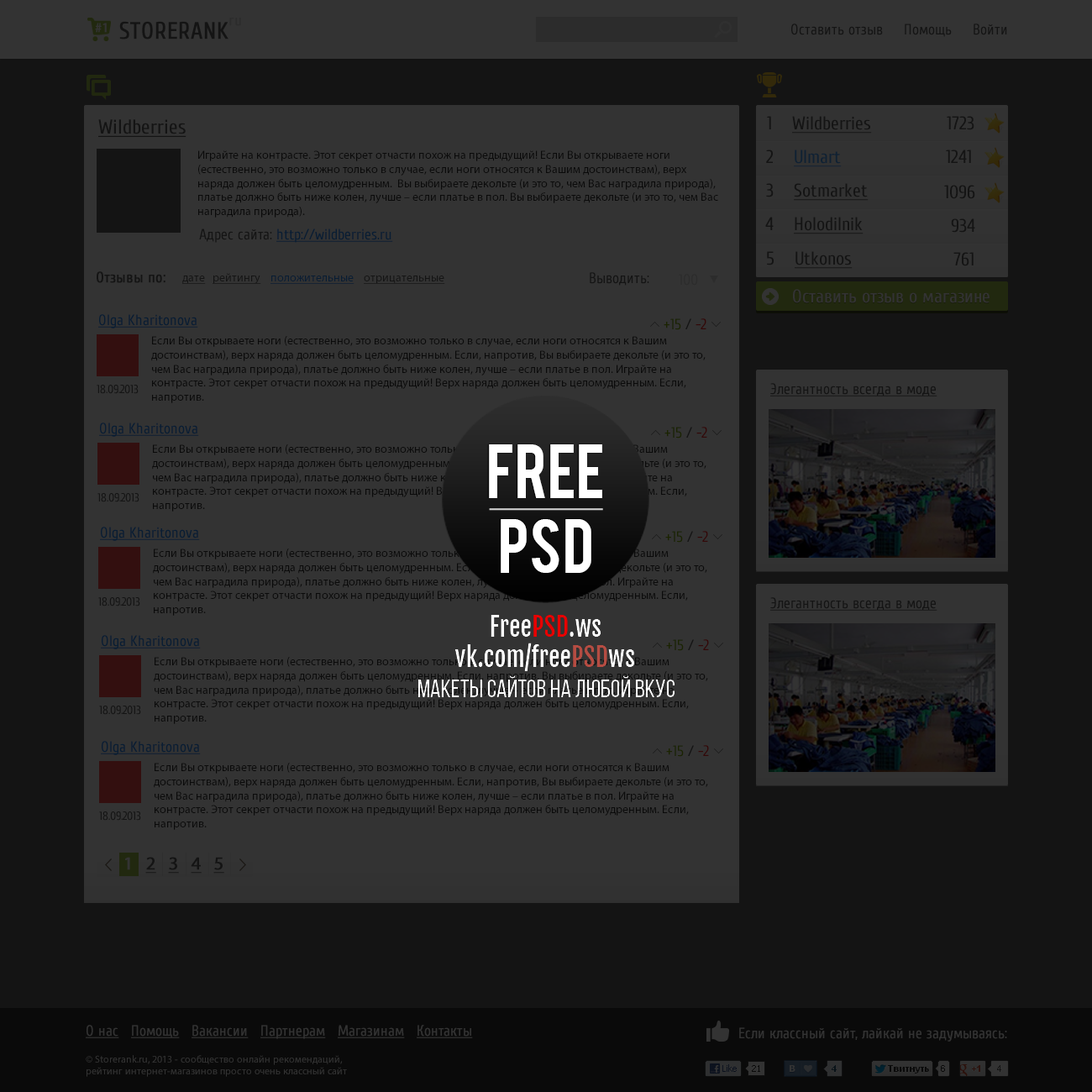
<style>
.page{position:relative;width:1092px;height:1092px;background:#333333}
.page>*{position:absolute;margin:0}
.t1{font:23.5px "Cuprum-Regular";color:#141414;font-weight:bold}
.t2{font:15.1px "Cuprum-Regular";color:#141414;font-weight:bold}
.t3{font:13.4px "MyriadPro-Regular";color:#333333;font-weight:bold}
.t4{font:15.1px "Cuprum-Regular";color:#141414}
.t5{font:20.2px "Cuprum-Regular";color:#141414;text-decoration:underline}
.t6{font:18.5px "Cuprum-Regular";color:#141414;text-decoration:underline}
.t7{font:18.5px "Cuprum-Regular";color:#141414}
.t8{font:18.5px "Cuprum-Regular";color:#0f2133;text-decoration:underline}
.t9{font:18.5px "Cuprum-Regular";color:#0f2133}
.t10{font:11.8px/14.1px "MyriadPro-Regular";color:#0a0a0a}
.t11{font:15.1px "Cuprum-Regular";text-decoration:underline}
.t12{font:15.1px "Cuprum-Regular"}
.t13{font:11.8px "MyriadPro-Regular";text-decoration:underline}
.t14{font:15.1px "Cuprum-Regular";color:#2c2c2c}
.t15{font:18.5px "Cuprum-Regular";color:#333333}
.t16{font:15.1px "Cuprum-Regular";color:#081d33;text-decoration:underline}
.t17{font:11.8px "Cuprum-Regular";color:#141414}
.t18{font:15.1px "Cuprum-Regular";color:#141414;text-decoration:underline}
.t19{font:18.5px "MyriadPro-Regular";color:#141414;font-weight:bold;text-decoration:underline}
.t20{font:18.5px "MyriadPro-Regular";color:#141414;font-weight:bold}
.t21{font:15.1px "Cuprum-Regular";color:#333333;text-decoration:underline}
.t22{font:15.1px "Cuprum-Regular";color:#333333}
.t23{font:10.1px/12.1px "MyriadPro-Regular";color:#333333}
</style>
<div class="page">
<p class="t1" style="left:119px;top:18px;width:122px;height:21px">STORERANK<span class="t2">ru</span></p>
<p class="t3" style="left:95px;top:23px;width:12px;height:10px">#1</p>
<p class="t4" style="left:791px;top:24px;width:216px;height:13px">Оставить отзыв     Помощь     Войти</p>
<p class="t5" style="left:98px;top:119px;width:88px;height:18px">Wildberries</p>
<p class="t6" style="left:767px;top:116px;width:207px;height:18px"><span class="t7">1    </span>Wildberries<span class="t7">               1723</span></p>
<p class="t8" style="left:766px;top:150px;width:76px;height:17px"><span class="t9">2    </span>Ulmart</p>
<p class="t7" style="left:946px;top:150px;width:25px;height:13px">1241</p>
<p class="t10" style="left:198px;top:150px;width:520px;height:68px">Играйте на контрасте. Этот секрет отчасти похож на предыдущий! Если Вы открываете ноги (естественно, это возможно только в случае, если ноги относятся к Вашим достоинствам), верх наряда должен быть целомудренным.  Вы выбираете декольте (и это то, чем Вас наградила природа), платье должно быть ниже колен, лучше – если платье в пол. Вы выбираете декольте (и это то, чем Вас наградила природа).</p>
<p class="t6" style="left:766px;top:183px;width:103px;height:18px"><span class="t7">3    </span>Sotmarket</p>
<p class="t7" style="left:944px;top:185px;width:31px;height:14px">1096</p>
<p class="t6" style="left:765px;top:217px;width:99px;height:17px"><span class="t7">4    </span>Holodilnik</p>
<p class="t7" style="left:951px;top:218px;width:24px;height:15px">934</p>
<p class="t11" style="left:199px;top:228px;width:194px;height:15px"><span class="t12">Адрес сайта: </span>http://wildberries.ru</p>
<p class="t6" style="left:767px;top:251px;width:86px;height:18px"><span class="t7">5    </span>Utkonos</p>
<p class="t7" style="left:953px;top:252px;width:21px;height:14px">761</p>
<p class="t2" style="left:97px;top:271px;width:68px;height:12px">Отзывы по:</p>
<p class="t13" style="left:182px;top:273px;width:263px;height:11px">дате   рейтингу    положительные    отрицательные</p>
<p class="t4" style="left:590px;top:272px;width:59px;height:14px">Выводить:</p>
<p class="t14" style="left:679px;top:274px;width:19px;height:12px">100</p>
<p class="t15" style="left:793px;top:289px;width:197px;height:14px">Оставить отзыв о магазине</p>
<p class="t16" style="left:98px;top:314px;width:100px;height:14px">Olga Kharitonova</p>
<p class="t12" style="left:664px;top:318px;width:42px;height:12px">+15 / -2</p>
<p class="t10" style="left:151px;top:336px;width:555px;height:67px">Если Вы открываете ноги (естественно, это возможно только в случае, если ноги относятся к Вашим достоинствам), верх наряда должен быть целомудренным. Если, напротив, Вы выбираете декольте (и это то, чем Вас наградила природа), платье должно быть ниже колен, лучше – если платье в пол. Играйте на контрасте. Этот секрет отчасти похож на предыдущий! Верх наряда должен быть целомудренным. Если, напротив.</p>
<p class="t17" style="left:97px;top:385px;width:42px;height:9px">18.09.2013</p>
<p class="t18" style="left:770px;top:383px;width:167px;height:13px">Элегантность всегда в моде</p>
<p class="t16" style="left:99px;top:423px;width:100px;height:14px">Olga Kharitonova</p>
<p class="t12" style="left:664px;top:427px;width:43px;height:11px">+15 / -2</p>
<p class="t17" style="left:97px;top:493px;width:42px;height:9px">18.09.2013</p>
<p class="t16" style="left:100px;top:527px;width:100px;height:14px">Olga Kharitonova</p>
<p class="t12" style="left:665px;top:531px;width:43px;height:12px">+15 / -2</p>
<p class="t17" style="left:98px;top:597px;width:42px;height:9px">18.09.2013</p>
<p class="t18" style="left:770px;top:597px;width:167px;height:14px">Элегантность всегда в моде</p>
<p class="t16" style="left:101px;top:635px;width:100px;height:14px">Olga Kharitonova</p>
<p class="t12" style="left:666px;top:639px;width:43px;height:12px">+15 / -2</p>
<p class="t17" style="left:99px;top:706px;width:42px;height:9px">18.09.2013</p>
<p class="t16" style="left:101px;top:741px;width:100px;height:14px">Olga Kharitonova</p>
<p class="t12" style="left:666px;top:745px;width:43px;height:12px">+15 / -2</p>
<p class="t10" style="left:154px;top:763px;width:554px;height:67px">Если Вы открываете ноги (естественно, это возможно только в случае, если ноги относятся к Вашим достоинствам), верх наряда должен быть целомудренным. Если, напротив, Вы выбираете декольте (и это то, чем Вас наградила природа), платье должно быть ниже колен, лучше – если платье в пол. Играйте на контрасте. Этот секрет отчасти похож на предыдущий! Верх наряда должен быть целомудренным. Если, напротив.</p>
<p class="t17" style="left:99px;top:811px;width:42px;height:10px">18.09.2013</p>
<p class="t19" style="left:125px;top:857px;width:99px;height:17px"><span class="t20">   </span><span class="t20">1   </span>2   3   4   5</p>
<p class="t21" style="left:86px;top:1025px;width:387px;height:14px">О нас   Помощь   Вакансии   Партнерам   Магазинам   Контакты</p>
<p class="t22" style="left:739px;top:1027px;width:268px;height:15px">Если классный сайт, лайкай не задумываясь:</p>
<p class="t23" style="left:86px;top:1055px;width:261px;height:22px">© Storerank.ru, 2013 - сообщество онлайн рекомендаций, рейтинг интернет-магазинов просто очень классный сайт</p>
</div>
